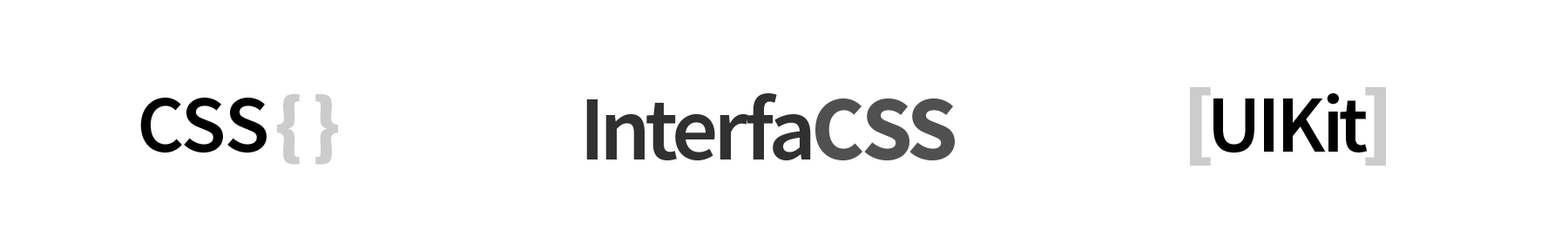
<style>
.page{position:relative;width:1568px;height:251px;background:#ffffff}
.page>*{position:absolute;margin:0}
.t1{font:81.6px "SourceSansPro-Semibold";letter-spacing:-0.025em;color:#000000}
.t2{font:91.8px "SourceSansPro-Black";letter-spacing:-0.025em;color:#cccccc}
.t3{font:91.8px "SourceSansPro-Black";color:#cccccc}
.t4{font:81.6px "SourceSansPro-Semibold";color:#000000}
.t5{font:81.6px "SourceSansPro-Black";color:#cccccc}
.t6{font:91.8px "SourceSansPro-Semibold";letter-spacing:-0.04em;color:#303030}
.t7{font:91.8px "SourceSansPro-Bold";letter-spacing:-0.04em;color:#505050}
</style>
<div class="page">
<p class="t1" style="left:1190px;top:87px;width:196px;height:79px"><span class="t2">[</span>UIKit<span class="t3">]</span></p>
<p class="t4" style="left:140px;top:94px;width:198px;height:71px">CSS <span class="t5">{ </span><span class="t5">}</span></p>
<p class="t6" style="left:586px;top:93px;width:369px;height:68px">Interfa<span class="t7">CSS</span></p>
</div>
